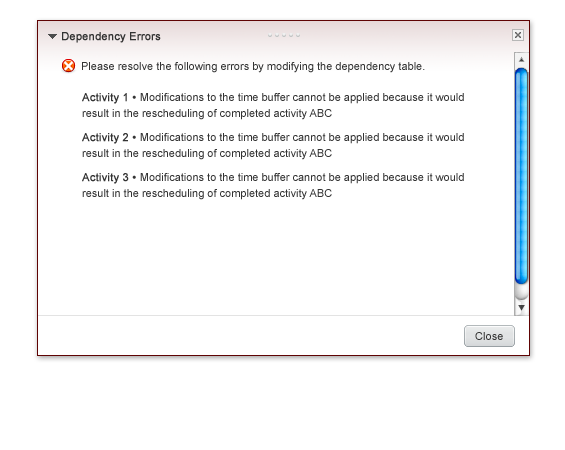
<style>
.page{position:relative;width:565px;height:450px;background:#ffffff}
.page>*{position:absolute;margin:0}
.t1{font:11px "ArialMT";color:#333333;font-weight:bold}
.t2{font:11px "ArialMT";color:#333333}
.t3{font:11px/16px "ArialMT";color:#333333}
.t4{font:11px/16px "ArialMT";color:#333333;font-weight:bold}
.t5{font:11px "ArialMT";letter-spacing:0.005em;color:#333333}
</style>
<div class="page">
<p class="t1" style="left:62px;top:32px;width:99px;height:11px">Dependency Errors</p>
<p class="t2" style="left:82px;top:62px;width:343px;height:11px">Please resolve the following errors by modifying the dependency table.</p>
<p class="t3" style="left:82px;top:93px;width:382px;height:27px"><span class="t4">Activity 1 • </span>Modifications to the time buffer cannot be applied because it would<br>result in the rescheduling of completed activity ABC</p>
<p class="t3" style="left:82px;top:133px;width:382px;height:27px"><span class="t4">Activity 2 • </span>Modifications to the time buffer cannot be applied because it would<br>result in the rescheduling of completed activity ABC</p>
<p class="t3" style="left:82px;top:173px;width:382px;height:27px"><span class="t4">Activity 3 • </span>Modifications to the time buffer cannot be applied because it would<br>result in the rescheduling of completed activity ABC</p>
<p class="t5" style="left:475px;top:332px;width:28px;height:8px">Close</p>
</div>
